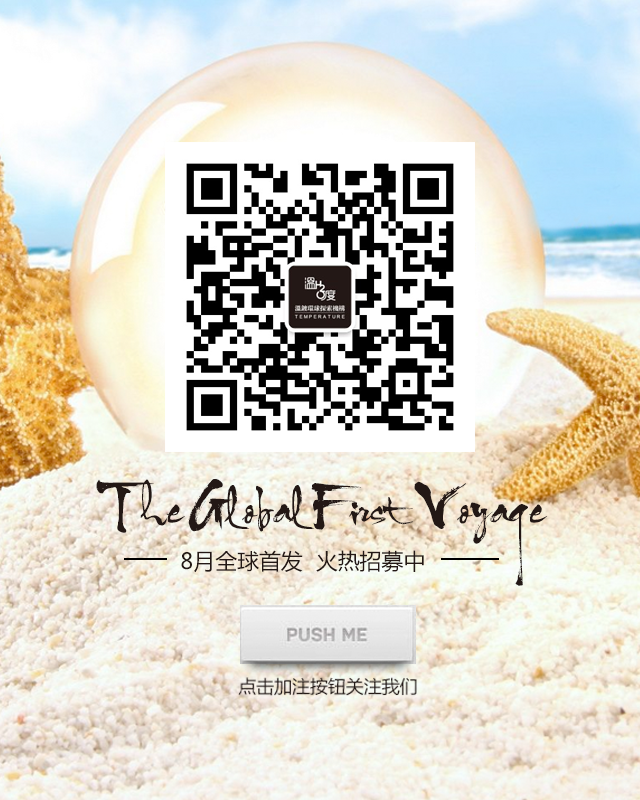
<style>
.page{position:relative;width:640px;height:800px}
.page>*{position:absolute;margin:0}
.t1{font:40.9px "VNI-HLThuphap";color:#231815}
.t2{font:21.9px "MicrosoftYaHei";color:#231815}
.t3{font:17.9px "MicrosoftYaHei";color:#251a17}
</style>
<div class="page">
<p class="t1" style="left:96px;top:479px;width:452px;height:107px;text-align:center">The Global First Voyage</p>
<p class="t2" style="left:181px;top:550px;width:243px;height:23px">8月全球首发  火热招募中</p>
<p class="t3" style="left:238px;top:677px;width:179px;height:19px">点击加注按钮关注我们</p>
</div>
